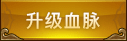
<style>
.page{position:relative;width:127px;height:41px}
.page>*{position:absolute;margin:0}
.t1{font:18px "PingFang-SC-Bold";letter-spacing:0.05em}
</style>
<div class="page">
<p class="t1" style="left:26px;top:12px;width:74px;height:17px">升级血脉</p>
</div>
